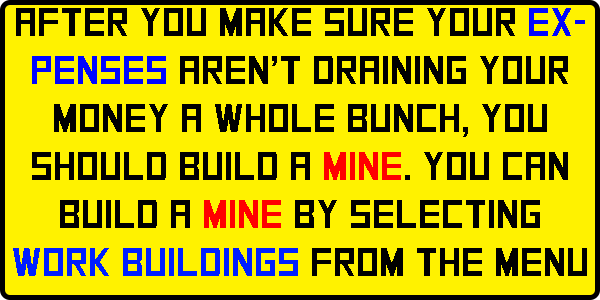
<style>
.page{position:relative;width:600px;height:300px;background:#fff200}
.page>*{position:absolute;margin:0}
.t1{font:40px "SquareFont";color:#000000}
.t2{font:40px "SquareFont";color:#0006ff}
.t3{font:40px "SquareFont";color:#ff0000}
.t4{font:40px "SquareFont";color:#001eff}
</style>
<div class="page">
<p class="t1" style="left:13px;top:8px;width:574px;height:268px;text-align:center">after you make sure your <span class="t2">expenses</span> aren’t draining your money a whole bunch, you should build a <span class="t3">mine</span>. you can build a <span class="t3">mine</span> by selecting <span class="t4">work buildings</span> from the menu</p>
</div>
